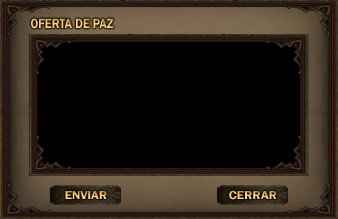
<style>
.page{position:relative;width:338px;height:219px;background:#000000}
.page>*{position:absolute;margin:0}
.t1{font:14px "FranklinGothic-Demi";scale:0.86 1}
.t2{font:12px "FranklinGothic-Demi";scale:1.07 1}
</style>
<div class="page">
<p class="t1" style="left:31px;top:18px;width:83px;height:11px">OFERTA DE PAZ</p>
<p class="t2" style="left:65px;top:191px;width:42px;height:8px">ENVIAR</p>
<p class="t2" style="left:229px;top:190px;width:48px;height:10px">CERRAR</p>
</div>
